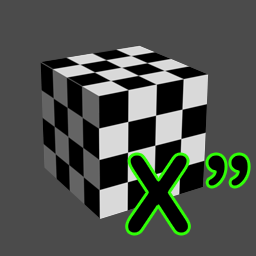
<style>
.page{position:relative;width:256px;height:256px;background:#4b4b4b}
.page>*{position:absolute;margin:0}
.t1{font:106.1px "ArialRoundedMTBold";letter-spacing:0.1em;color:#000000;font-weight:bold}
</style>
<div class="page">
<p class="t1" style="left:126px;top:154px;width:124px;height:80px">X”</p>
</div>
